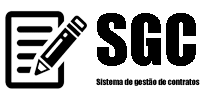
<style>
.page{position:relative;width:211px;height:105px;background:#ffffff}
.page>*{position:absolute;margin:0}
.t1{font:64px "Impact";color:#000000}
.t2{font:8px "Impact";color:#000000}
</style>
<div class="page">
<p class="t1" style="left:97px;top:13px;width:99px;height:53px">SGC</p>
<p class="t2" style="left:96px;top:78px;width:104px;height:8px">Sistema de gestão de contratos</p>
</div>
